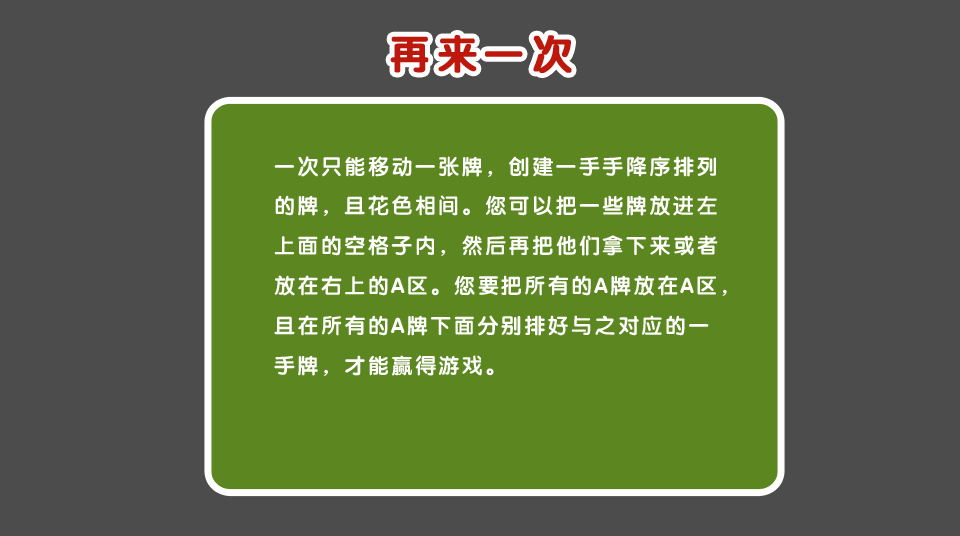
<style>
.page{position:relative;width:960px;height:536px;background:#4c4c4c}
.page>*{position:absolute;margin:0}
.t1{font:40px "JCuYuan";letter-spacing:0.15em;color:#bc180c;font-weight:bold}
.t2{font:21.3px/40px "JCuYuan";letter-spacing:0.1em;color:#fefefe}
</style>
<div class="page">
<p class="t1" style="left:390px;top:35px;width:182px;height:38px">再来一次</p>
<p class="t2" style="left:274px;top:156px;width:453px;height:220px">一次只能移动一张牌，创建一手手降序排列<br>的牌，且花色相间。您可以把一些牌放进左<br>上面的空格子内，然后再把他们拿下来或者<br>放在右上的A区。您要把所有的A牌放在A区，<br>且在所有的A牌下面分别排好与之对应的一<br>手牌，才能赢得游戏。</p>
</div>
